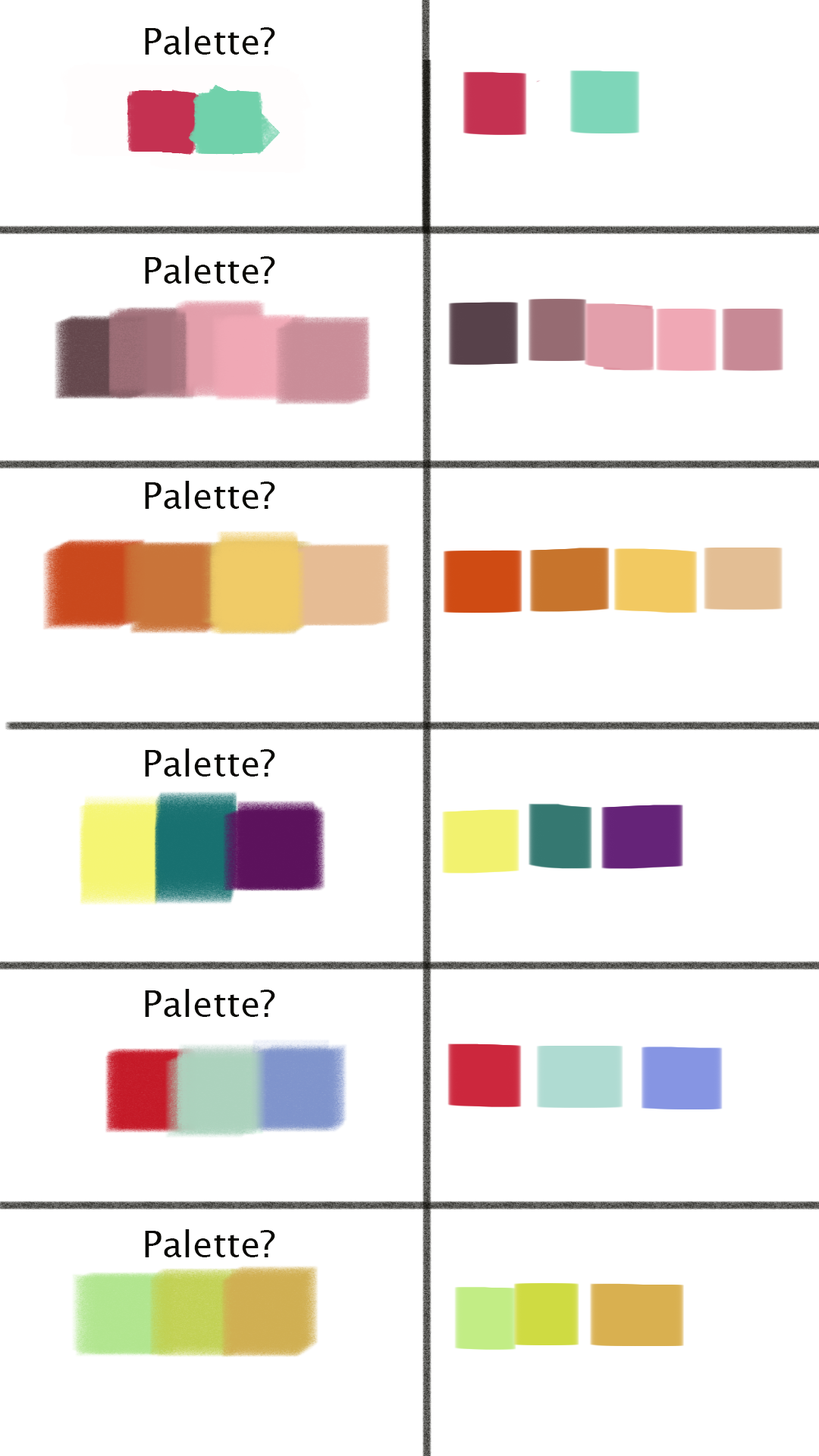
<style>
.page{position:relative;width:819px;height:1456px;background:#ffffff}
.page>*{position:absolute;margin:0}
.t1{font:36.4px "LucidaSans";color:#0a0904}
</style>
<div class="page">
<p class="t1" style="left:145px;top:27px;width:130px;height:28px">Palette?</p>
<p class="t1" style="left:145px;top:256px;width:130px;height:28px">Palette?</p>
<p class="t1" style="left:145px;top:481px;width:130px;height:28px">Palette?</p>
<p class="t1" style="left:145px;top:748px;width:130px;height:29px">Palette?</p>
<p class="t1" style="left:145px;top:989px;width:130px;height:28px">Palette?</p>
<p class="t1" style="left:145px;top:1229px;width:130px;height:28px">Palette?</p>
</div>
